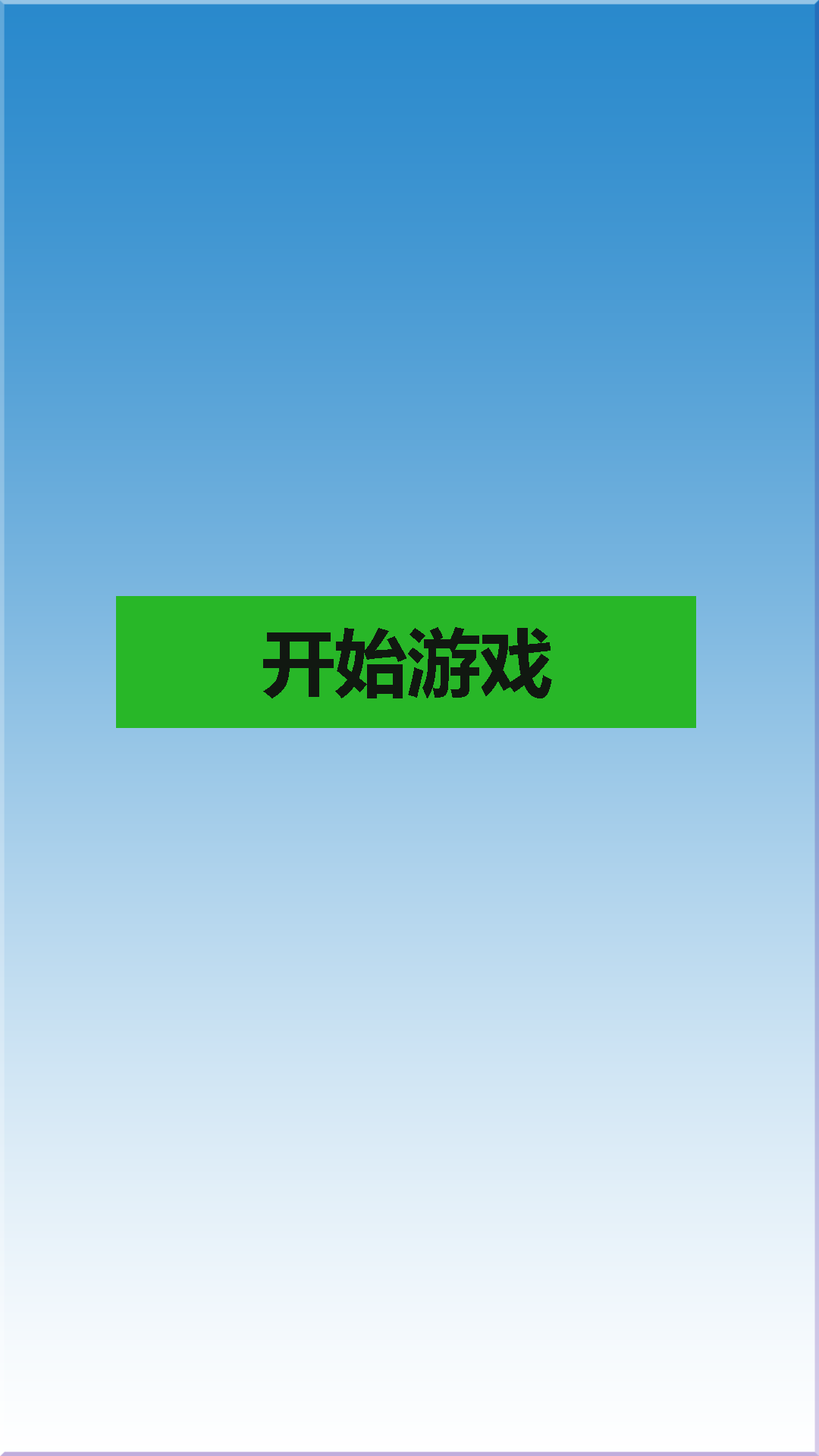
<style>
.page{position:relative;width:819px;height:1456px}
.page>*{position:absolute;margin:0}
.t1{font:72.8px "MicrosoftYaHei-Bold";color:#111811}
</style>
<div class="page">
<p class="t1" style="left:263px;top:627px;width:289px;height:71px">开始游戏</p>
</div>
